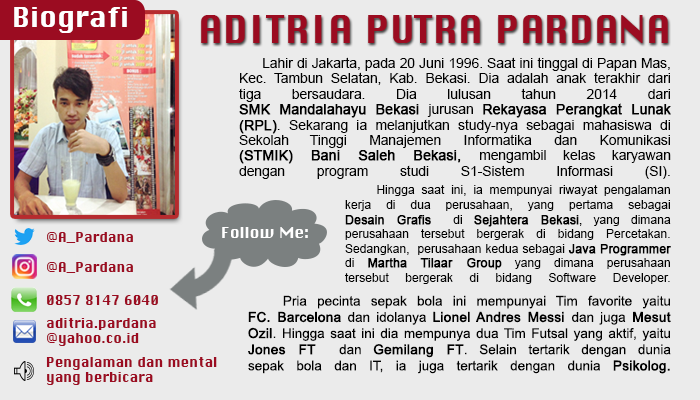
<style>
.page{position:relative;width:700px;height:400px;background:#ebebeb}
.page>*{position:absolute;margin:0}
.t1{font:27.2px "Chicago";color:#ffffff}
.t2{font:37.2px "Chicago";color:#9b0c21}
.t3{font:12.8px "ArialMT";color:#000000;scale:1.08 1}
.t4{font:12.8px "ArialMT";color:#000000;font-weight:bold;scale:1.08 1}
.t5{font:12.2px "ArialMT";color:#000000}
.t6{font:12.2px "ArialMT";color:#000000;font-weight:bold}
.t7{font:13.2px "Chicago";color:#9b0c21}
.t8{font:14.7px "Chicago";color:#ffffff}
.t9{font:13.5px "ArialMT";color:#000000}
.t10{font:13.5px "ArialMT";color:#000000;font-weight:bold}
</style>
<div class="page">
<p class="t1" style="left:14px;top:7px;width:113px;height:26px">Biografi</p>
<p class="t2" style="left:201px;top:15px;width:467px;height:28px">ADITRIA PUTRA PARDANA</p>
<p class="t3" style="left:239px;top:57px;width:432px;height:122px;text-align:justify">Lahir di Jakarta, pada 20 Juni 1996. Saat ini tinggal di Papan Mas, Kec. Tambun Selatan, Kab. Bekasi. Dia adalah anak terakhir dari <br>tiga bersaudara. Dia lulusan tahun 2014 dari <br><span class="t4">SMK Mandalahayu Bekasi </span>jurusan <span class="t4">Rekayasa Perangkat Lunak (RPL)</span>. Sekarang ia melanjutkan study-nya sebagai mahasiswa di<br>Sekolah Tinggi Manajemen Informatika dan Komunikasi<br><span class="t4">(STMIK) Bani Saleh Bekasi, </span>mengambil kelas karyawan<br>dengan program studi S1-Sistem Informasi (SI).</p>
<p class="t5" style="left:345px;top:185px;width:326px;height:99px;text-align:justify">Hingga saat ini, ia mempunyai riwayat pengalaman kerja di dua perusahaan, yang pertama sebagai<br><span class="t6">Desain Grafis</span>  di <span class="t6">Sejahtera Bekasi</span>, yang dimana perusahaan tersebut bergerak di bidang Percetakan. Sedangkan,  perusahaan kedua sebagai <span class="t6">Java Programmer</span> di <span class="t6">Martha Tilaar Group</span> yang dimana perusahaan<br>tersebut bergerak di bidang Software Developer.</p>
<p class="t7" style="left:47px;top:232px;width:86px;height:11px">@A_Pardana</p>
<p class="t8" style="left:222px;top:227px;width:86px;height:11px">Follow Me:</p>
<p class="t7" style="left:47px;top:262px;width:86px;height:11px">@A_Pardana</p>
<p class="t7" style="left:47px;top:295px;width:111px;height:10px">0857 8147 6040</p>
<p class="t9" style="left:248px;top:295px;width:423px;height:79px;text-align:justify">Pria pecinta sepak bola ini mempunyai Tim favorite yaitu<br><span class="t10">FC. Barcelona</span> dan idolanya <span class="t10">Lionel Andres Messi </span>dan juga<span class="t10"> Mesut Ozil</span>. Hingga saat ini dia mempunya dua Tim Futsal yang aktif, yaitu <br><span class="t10">Jones FT</span>  dan <span class="t10">Gemilang FT</span>. Selain tertarik dengan dunia <br>sepak bola dan IT, ia juga tertarik dengan dunia <span class="t10">Psikolog.</span></p>
<p class="t7" style="left:47px;top:318px;width:109px;height:28px">aditria.pardana<br>@yahoo.co.id</p>
<p class="t7" style="left:46px;top:357px;width:171px;height:28px">Pengalaman dan mental<br>yang berbicara</p>
</div>
